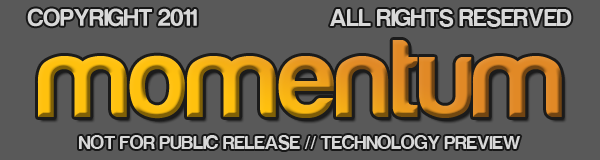
<style>
.page{position:relative;width:600px;height:160px;background:#595959}
.page>*{position:absolute;margin:0}
.t1{font:25px "Harabara";color:#d8d8d8}
.t2{font:20px "Harabara";color:#d8d8d8}
</style>
<div class="page">
<p class="t1" style="left:27px;top:8px;width:170px;height:19px">COPYRIGHT 2011</p>
<p class="t1" style="left:330px;top:9px;width:242px;height:18px">ALL RIGHTS RESERVED</p>
<p class="t2" style="left:79px;top:135px;width:442px;height:15px">NOT FOR PUBLIC RELEASE // TECHNOLOGY PREVIEW</p>
</div>
